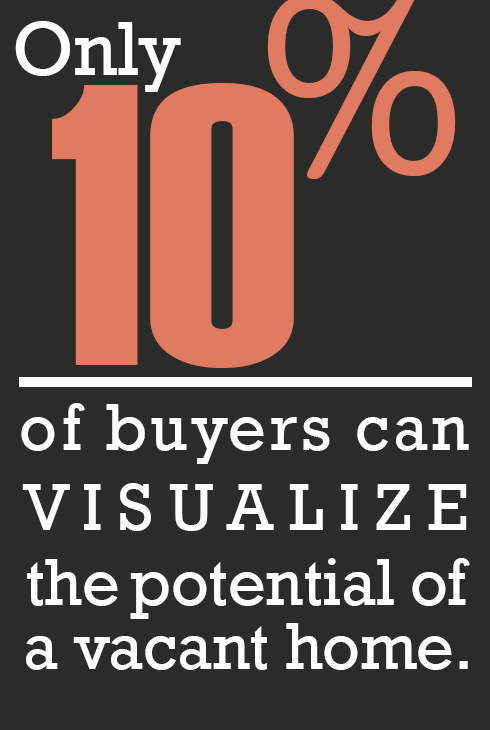
<style>
.page{position:relative;width:490px;height:730px;background:#2b2b2b}
.page>*{position:absolute;margin:0}
.t1{font:78px "Rockwell";color:#ffffff}
.t2{font:400px "Haettenschweiler";color:#e07a61}
.t3{font:67px/64px "Rockwell";letter-spacing:-0.005em;color:#ffffff}
.t4{font:67px/64px "Rockwell";letter-spacing:0.075em;color:#ffffff}
.t5{font:67px/64px "Rockwell";letter-spacing:0.055em;color:#ffffff}
.t6{font:67px/80px "Rockwell";letter-spacing:0.275em;color:#ffffff}
.t7{font:67px/80px "Rockwell";letter-spacing:0.235em;color:#ffffff}
.t8{font:67px/80px "Rockwell";letter-spacing:-0.005em;color:#ffffff}
.t9{font:67px/75px "Rockwell";letter-spacing:-0.005em;color:#ffffff}
.t10{font:67px/64px "Rockwell";letter-spacing:0.015em;color:#ffffff}
</style>
<div class="page">
<p class="t1" style="left:15px;top:21px;width:166px;height:71px">Only</p>
<p class="t2" style="left:52px;top:83px;width:242px;height:285px">10</p>
<p class="t3" style="left:21px;top:403px;width:449px;height:267px"><span class="t4">o</span><span class="t5">f buyers ca</span><span class="t4">n<br></span><span class="t6">V</span><span class="t7">ISUALIZ</span><span class="t8">E<br></span><span class="t9">the potential </span><span class="t10">o</span>f<br>a vacant hom<span class="t10">e</span>.</p>
</div>
